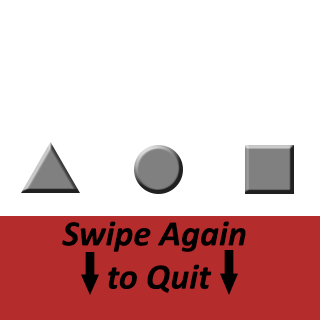
<style>
.page{position:relative;width:320px;height:320px;background:#ffffff}
.page>*{position:absolute;margin:0}
.t1{font:36px "Calibri-BoldItalic";color:#000000}
</style>
<div class="page">
<p class="t1" style="left:62px;top:221px;width:184px;height:72px;text-align:center">Swipe Again <br>to Quit</p>
</div>
